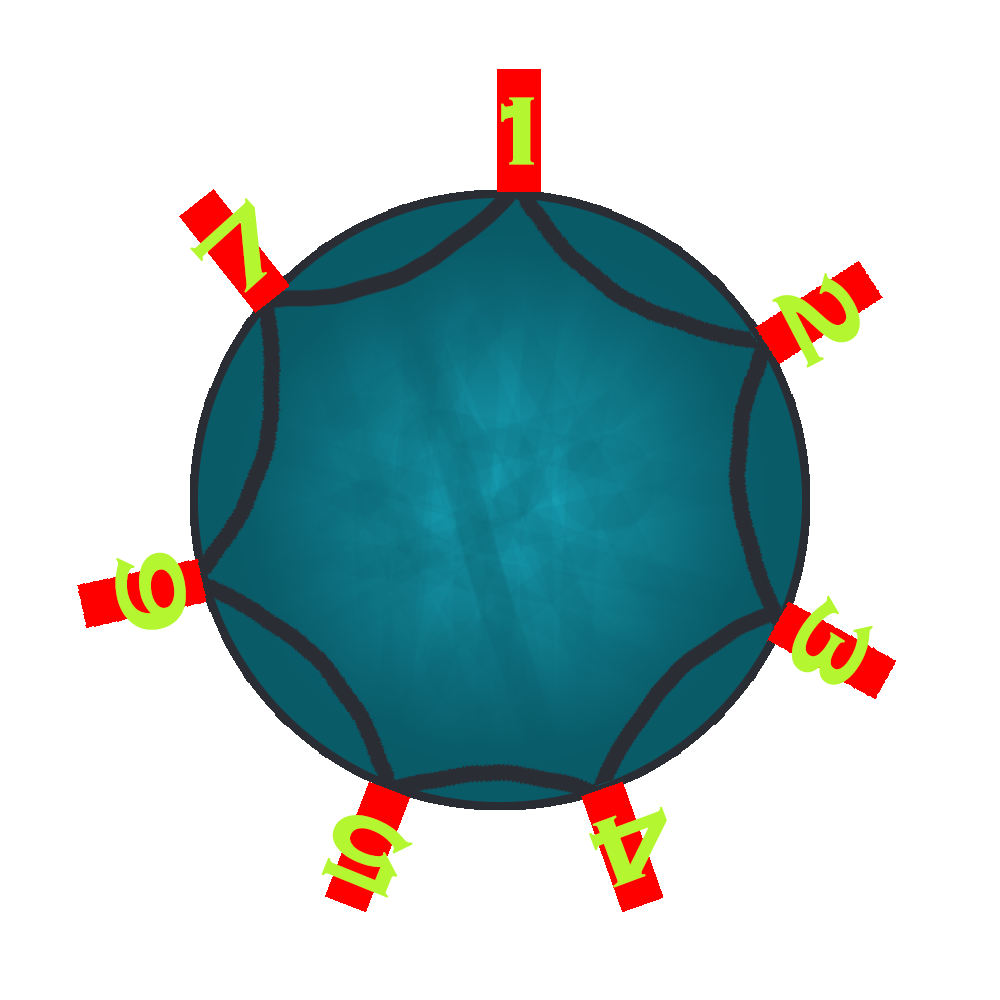
<style>
.page{position:relative;width:1000px;height:1000px;background:#ffffff}
.page>*{position:absolute;margin:0}
.t1{font:120px "CopperplateGothic-Bold";letter-spacing:-0.025em;color:#b4f731;scale:0.83 1}
.t2{font:100px "CopperplateGothic-Bold";letter-spacing:-0.025em;color:#b4f731;scale:1.2 1}
</style>
<div class="page">
<p class="t1" style="left:501px;top:97px;width:33px;height:68px">1</p>
<p class="t2" style="left:190px;top:198px;width:77px;height:95px;rotate:-42deg">7</p>
<p class="t1" style="left:772px;top:273px;width:88px;height:95px;rotate:63deg">2</p>
<p class="t2" style="left:115px;top:552px;width:71px;height:78px;rotate:-97deg">6</p>
<p class="t1" style="left:791px;top:595px;width:82px;height:90px;rotate:122deg">3</p>
<p class="t2" style="left:589px;top:806px;width:78px;height:82px;rotate:160deg">4</p>
<p class="t2" style="left:321px;top:815px;width:92px;height:83px;rotate:-158deg">5</p>
</div>
